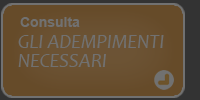
<style>
.page{position:relative;width:200px;height:100px;background:#664b29}
.page>*{position:absolute;margin:0}
.t1{font:14px "Arial-BoldMT";color:#717171}
.t2{font:20px/19.5px "Candara-Italic";color:#717171}
</style>
<div class="page">
<p class="t1" style="left:20px;top:17px;width:60px;height:10px">Consulta</p>
<p class="t2" style="left:18px;top:35px;width:146px;height:32px">GLI ADEMPIMENTI<br>NECESSARI</p>
</div>
